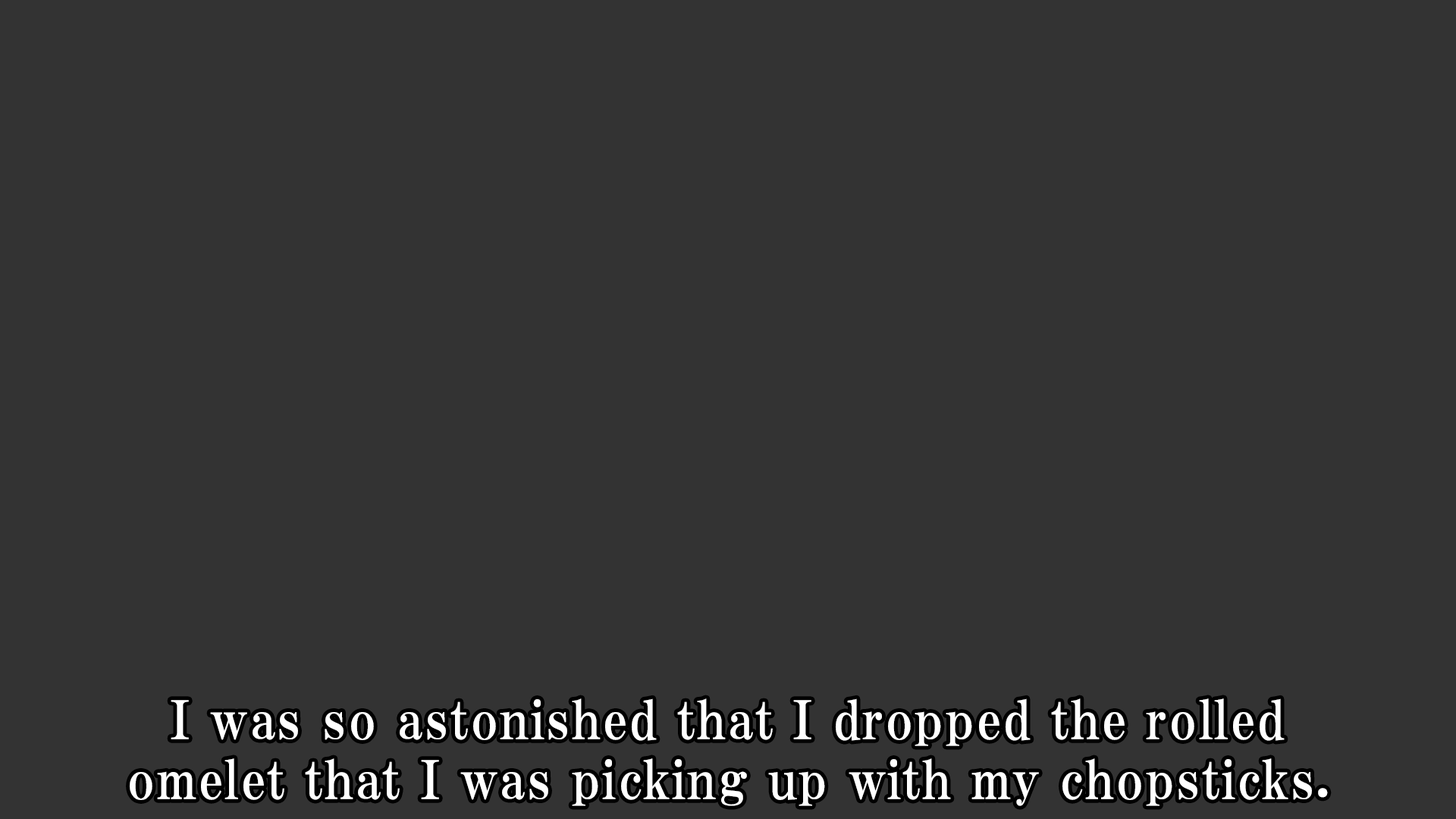
<style>
.page{position:relative;width:1456px;height:819px;background:#333333}
.page>*{position:absolute;margin:0}
.t1{font:53.1px/59.9px "HGPMinchoE";letter-spacing:0.025em;color:#ffffff}
</style>
<div class="page">
<p class="t1" style="left:130px;top:698px;width:1198px;height:108px;text-align:center">I was so astonished that I dropped the rolled<br>omelet that I was picking up with my chopsticks.</p>
</div>
